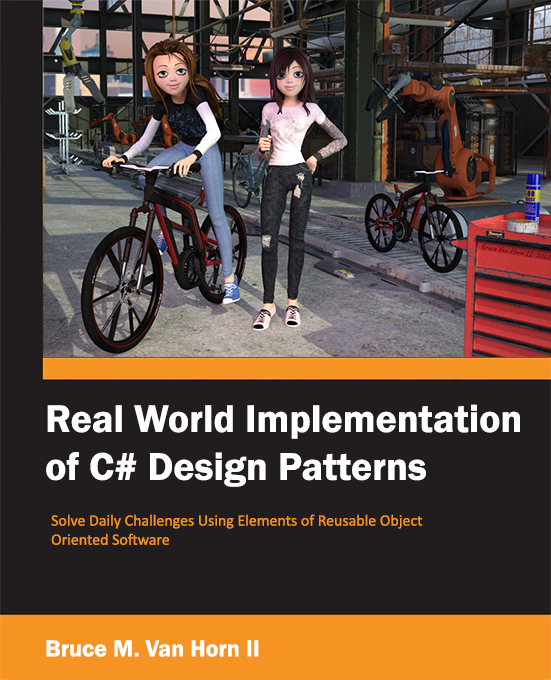
<style>
.page{position:relative;width:551px;height:680px;background:#211d1e}
.page>*{position:absolute;margin:0}
.t1{font:39.8px "FranklinGothic-Demi";color:#ffffff}
.t2{font:15.9px "Calibri";color:#f69423}
.t3{font:23.9px "FranklinGothic-Demi";color:#ffffff}
</style>
<div class="page">
<p class="t1" style="left:46px;top:404px;width:474px;height:83px">Real World Implementation<br>of C# Design Patterns</p>
<p class="t2" style="left:51px;top:514px;width:372px;height:31px">Solve Daily Challenges Using Elements of Reusable Object <br>Oriented Software</p>
<p class="t3" style="left:46px;top:640px;width:213px;height:17px">Bruce M. Van Horn II</p>
</div>
